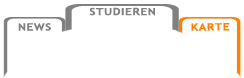
<style>
.page{position:relative;width:244px;height:78px;background:#ffffff}
.page>*{position:absolute;margin:0}
.t1{font:10px "TrebuchetMS-Bold";letter-spacing:0.05em;color:#808080;scale:1.2 1}
.t2{font:10px "TrebuchetMS-Bold";letter-spacing:0.05em;color:#ff7f00;scale:1.2 1}
</style>
<div class="page">
<p class="t1" style="left:89px;top:7px;width:66px;height:9px">STUDIEREN</p>
<p class="t1" style="left:18px;top:23px;width:33px;height:8px">NEWS</p>
<p class="t2" style="left:191px;top:23px;width:39px;height:8px">KARTE</p>
</div>
